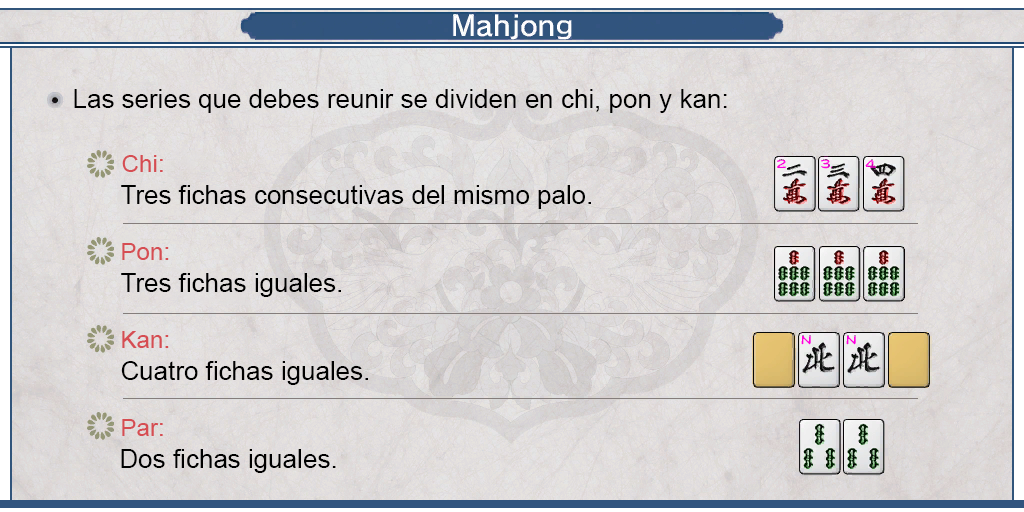
<style>
.page{position:relative;width:1024px;height:512px}
.page>*{position:absolute;margin:0}
.t1{font:26px "ArialMT";color:#000000}
.t2{font:24px "ArialMT";color:#d64d52}
</style>
<div class="page">
<p class="t1" style="left:74px;top:89px;width:653px;height:24px">Las series que debes reunir se dividen en chi, pon y kan:</p>
<p class="t2" style="left:122px;top:155px;width:41px;height:17px">Chi:</p>
<p class="t1" style="left:121px;top:185px;width:470px;height:24px">Tres fichas consecutivas del mismo palo.</p>
<p class="t2" style="left:122px;top:243px;width:47px;height:17px">Pon:</p>
<p class="t1" style="left:121px;top:273px;width:220px;height:24px">Tres fichas iguales.</p>
<p class="t2" style="left:122px;top:331px;width:47px;height:17px">Kan:</p>
<p class="t1" style="left:121px;top:361px;width:247px;height:24px">Cuatro fichas iguales.</p>
<p class="t2" style="left:122px;top:419px;width:41px;height:17px">Par:</p>
<p class="t1" style="left:121px;top:449px;width:215px;height:24px">Dos fichas iguales.</p>
</div>
